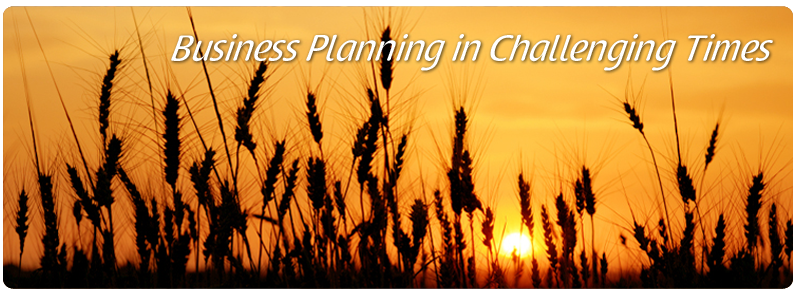
<style>
.page{position:relative;width:796px;height:289px}
.page>*{position:absolute;margin:0}
.t1{font:36px "RaspoutineClassic";color:#ffffff;font-style:italic}
</style>
<div class="page">
<p class="t1" style="left:171px;top:34px;width:602px;height:37px">Business Planning in Challenging Times</p>
</div>
